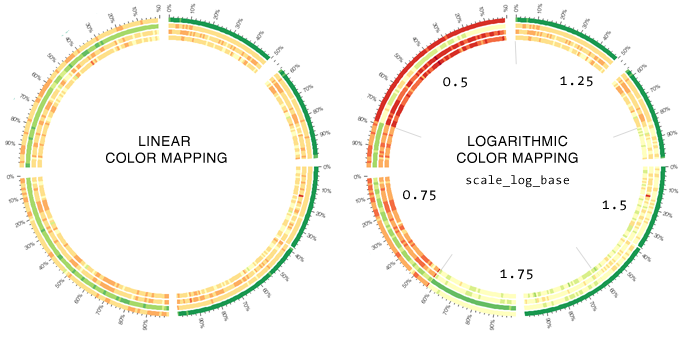
<style>
.page{position:relative;width:682px;height:340px;background:#ffffff}
.page>*{position:absolute;margin:0}
.t1{font:14px "TheSansMono-Plain";letter-spacing:0.025em;color:#000000}
.t2{font:14px "HelveticaLT";letter-spacing:0.025em;color:#000000;text-transform:uppercase}
.t3{font:12px "TheSansMono-Plain";letter-spacing:0.025em;color:#000000}
</style>
<div class="page">
<p class="t1" style="left:443px;top:77px;width:24px;height:11px">0.5</p>
<p class="t1" style="left:560px;top:76px;width:33px;height:11px">1.25</p>
<p class="t2" style="left:106px;top:136px;width:121px;height:27px;text-align:center">linear <br>color mapping</p>
<p class="t2" style="left:457px;top:135px;width:121px;height:28px;text-align:center">LOGarithmic<br>color mapping</p>
<p class="t3" style="left:466px;top:175px;width:103px;height:13px">scale_log_base</p>
<p class="t1" style="left:403px;top:190px;width:33px;height:11px">0.75</p>
<p class="t1" style="left:602px;top:200px;width:24px;height:11px">1.5</p>
<p class="t1" style="left:500px;top:269px;width:33px;height:11px">1.75</p>
</div>
